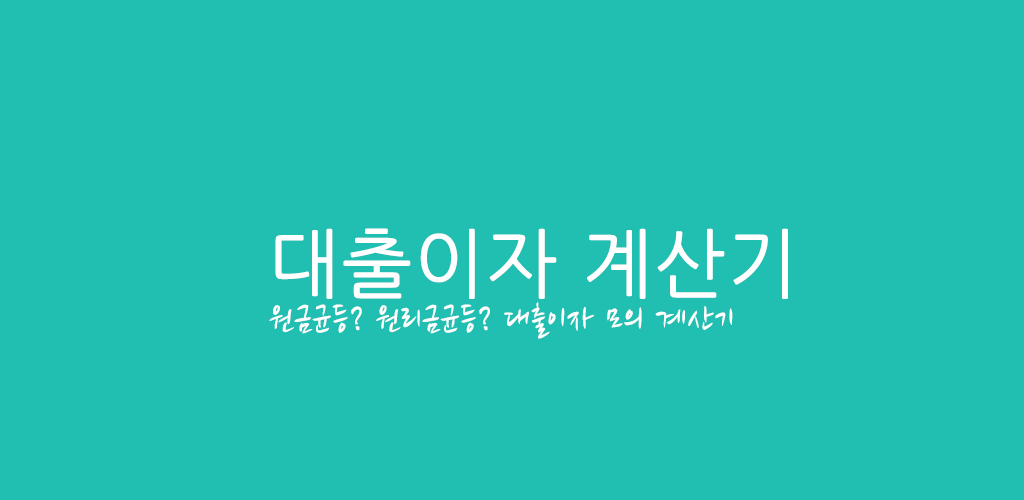
<style>
.page{position:relative;width:1024px;height:500px;background:#21bfb2}
.page>*{position:absolute;margin:0}
.t1{font:36px "NanumBrush";color:#ffffff;font-weight:bold}
.t2{font:75px "NanumGothic";color:#ffffff;font-weight:bold}
</style>
<div class="page">
<p class="t1" style="left:269px;top:228px;width:519px;height:111px"><span class="t2">대출이자 계산기<br></span>원금균등? 원리금균등? 대출이자 모의 계산기</p>
</div>
